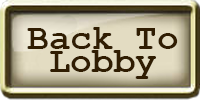
<style>
.page{position:relative;width:200px;height:100px}
.page>*{position:absolute;margin:0}
.t1{font:36px "CourierNewPS-BoldMT";color:#301d02}
</style>
<div class="page">
<p class="t1" style="left:27px;top:27px;width:151px;height:52px">Back To Lobby</p>
</div>
